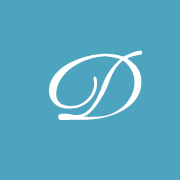
<style>
.page{position:relative;width:180px;height:180px;background:#4da4bf}
.page>*{position:absolute;margin:0}
.t1{font:98.3px "HenryMorganHand";color:#ffffff;scale:1.14 1}
</style>
<div class="page">
<p class="t1" style="left:49px;top:50px;width:93px;height:70px">D</p>
</div>
